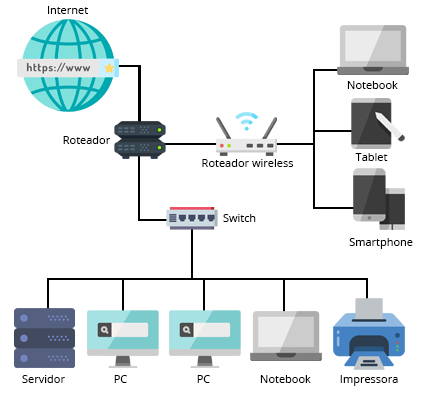
<style>
.page{position:relative;width:425px;height:395px;background:#ffffff}
.page>*{position:absolute;margin:0}
.t1{font:11px "OpenSans";color:#000000}
</style>
<div class="page">
<p class="t1" style="left:48px;top:6px;width:40px;height:8px">Internet</p>
<p class="t1" style="left:347px;top:81px;width:51px;height:8px">Notebook</p>
<p class="t1" style="left:63px;top:136px;width:48px;height:8px">Roteador</p>
<p class="t1" style="left:202px;top:159px;width:92px;height:8px">Roteador wireless</p>
<p class="t1" style="left:355px;top:153px;width:33px;height:8px">Tablet</p>
<p class="t1" style="left:223px;top:214px;width:33px;height:8px">Switch</p>
<p class="t1" style="left:349px;top:238px;width:64px;height:11px">Smartphone</p>
<p class="t1" style="left:22px;top:375px;width:43px;height:8px">Servidor</p>
<p class="t1" style="left:114px;top:375px;width:13px;height:8px">PC</p>
<p class="t1" style="left:197px;top:375px;width:13px;height:8px">PC</p>
<p class="t1" style="left:260px;top:375px;width:51px;height:8px">Notebook</p>
<p class="t1" style="left:340px;top:375px;width:58px;height:11px">Impressora</p>
</div>
